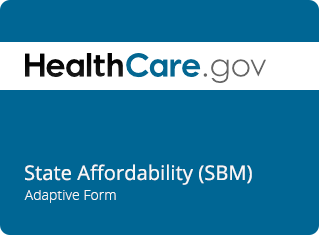
<style>
.page{position:relative;width:319px;height:235px;background:#006694}
.page>*{position:absolute;margin:0}
.t1{font:20px "OpenSans";letter-spacing:0.005em;color:#f7f7f7}
.t2{font:14px "OpenSans-Light";letter-spacing:0.005em;color:#f7f7f7}
</style>
<div class="page">
<p class="t1" style="left:25px;top:164px;width:227px;height:21px">State Affordability (SBM)</p>
<p class="t2" style="left:24px;top:190px;width:92px;height:13px">Adaptive Form</p>
</div>
